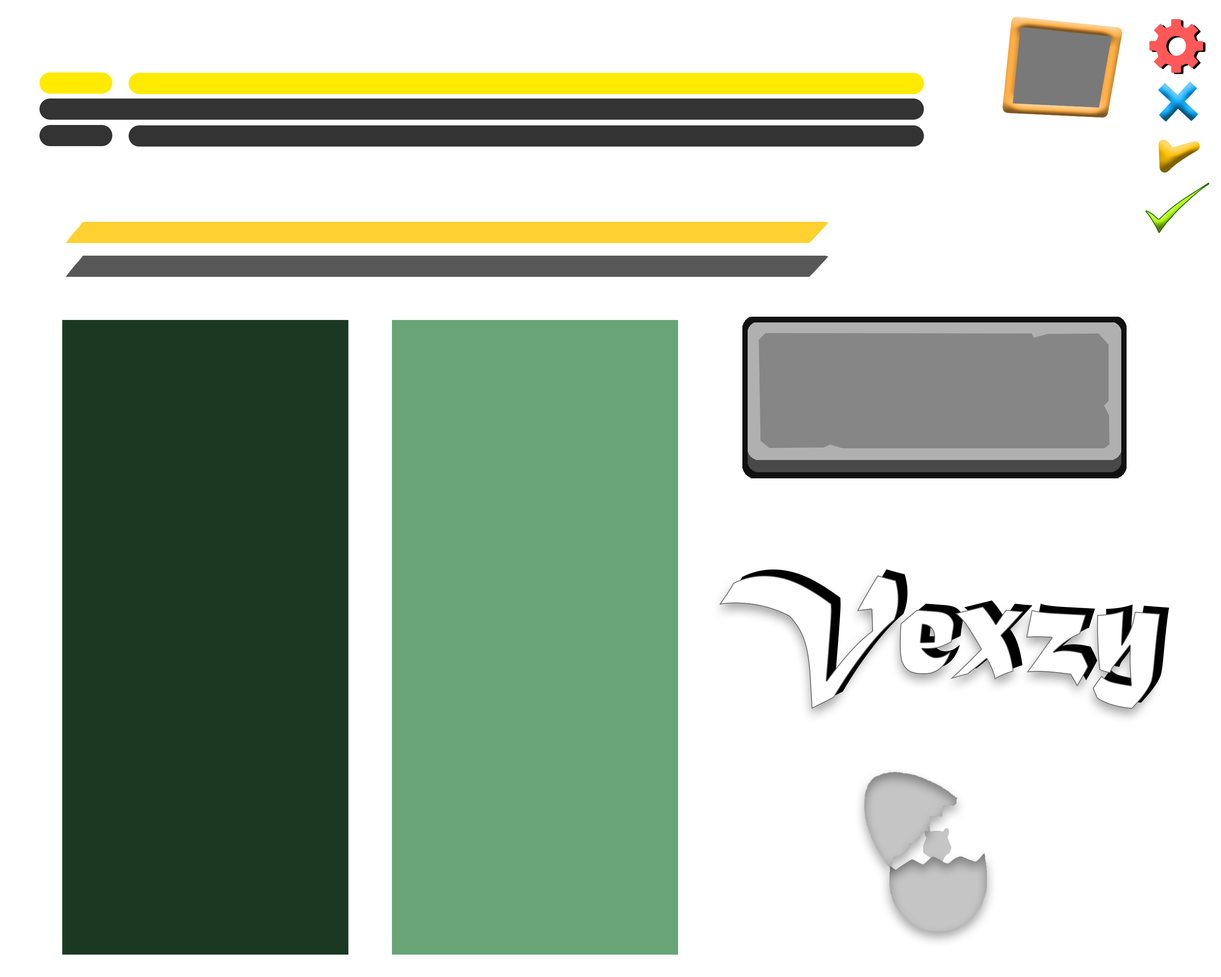
<style>
.page{position:relative;width:1221px;height:977px;background:#ffffff}
.page>*{position:absolute;margin:0}
.t1{font:148.7px "MaturaMTScriptCapitals"}
</style>
<div class="page">
<p class="t1" style="left:728px;top:569px;width:441px;height:133px">Vexzy</p>
</div>
